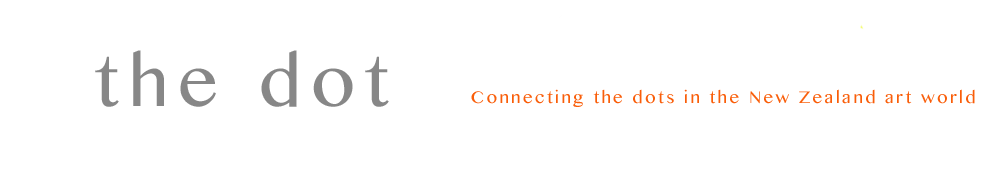
<style>
.page{position:relative;width:992px;height:170px;background:#ffffff}
.page>*{position:absolute;margin:0}
.t1{font:24px "SinhalaMN";letter-spacing:0.1em;color:#f95e0a}
</style>
<div class="page">
<p class="t1" style="left:471px;top:89px;width:504px;height:18px">Connecting the dots in the New Zealand art world</p>
</div>
